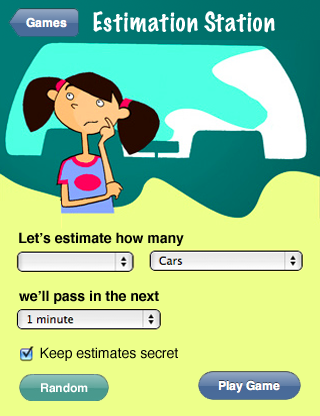
<style>
.page{position:relative;width:320px;height:416px;background:#edff8a}
.page>*{position:absolute;margin:0}
.t1{font:24px "MarkerFelt-Thin";color:#ffffff}
.t2{font:14px "Helvetica-Bold";color:#000000}
.t3{font:14px "Helvetica";color:#000000}
.t4{font:12px "Helvetica-Bold";color:#ffffff}
</style>
<div class="page">
<p class="t1" style="left:93px;top:11px;width:182px;height:22px">Estimation Station</p>
<p class="t2" style="left:19px;top:232px;width:165px;height:14px">Let’s estimate how many</p>
<p class="t2" style="left:19px;top:290px;width:140px;height:14px">we’ll pass in the next</p>
<p class="t3" style="left:40px;top:347px;width:138px;height:14px">Keep estimates secret</p>
<p class="t4" style="left:41px;top:383px;width:47px;height:10px">Random</p>
</div>
